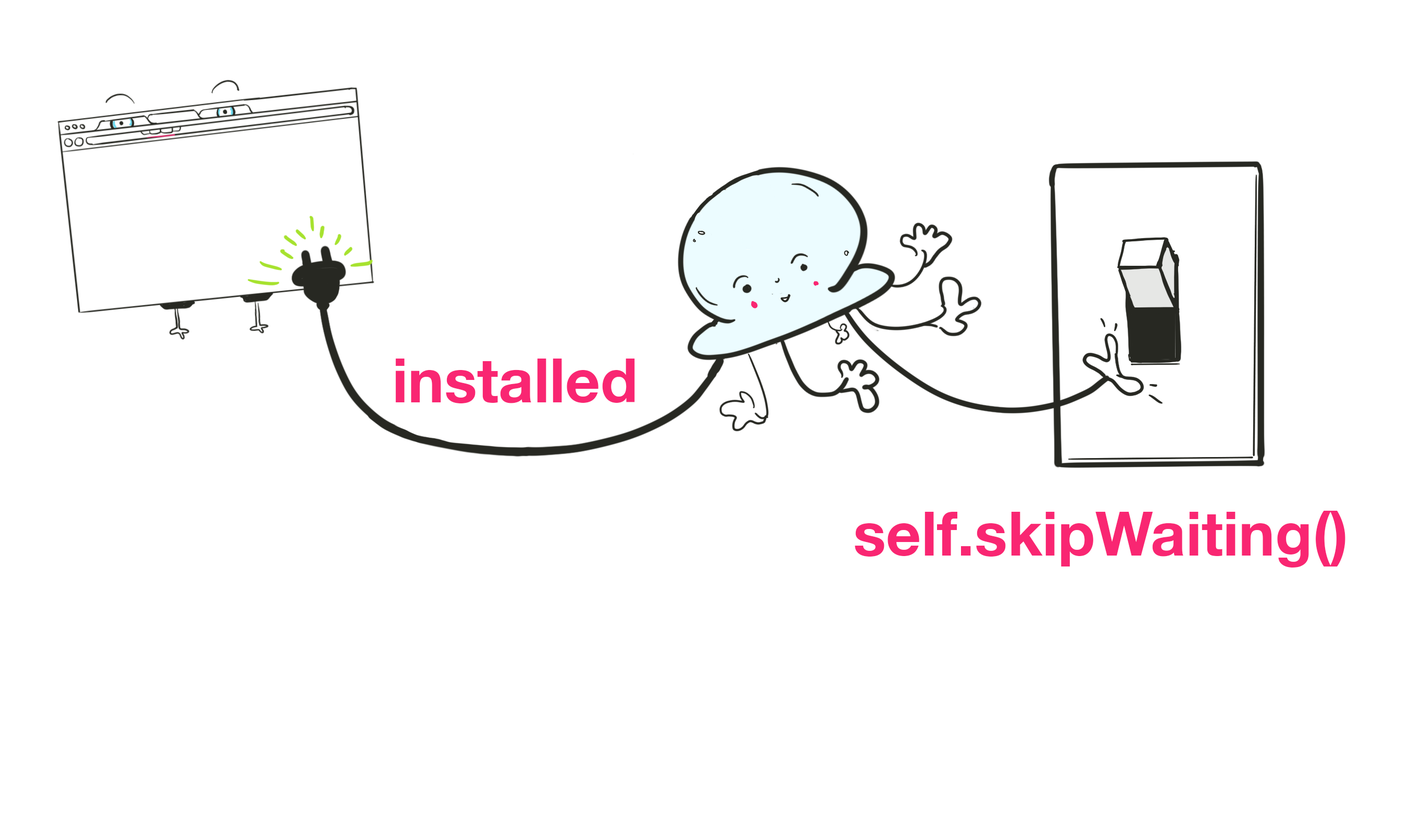
<style>
.page{position:relative;width:1423px;height:838px;background:#ffffff}
.page>*{position:absolute;margin:0}
.t1{font:61.1px "HelveticaNeue-Bold";color:#f92672}
</style>
<div class="page">
<p class="t1" style="left:395px;top:358px;width:240px;height:45px">installed</p>
<p class="t1" style="left:855px;top:511px;width:491px;height:56px">self.skipWaiting()</p>
</div>
